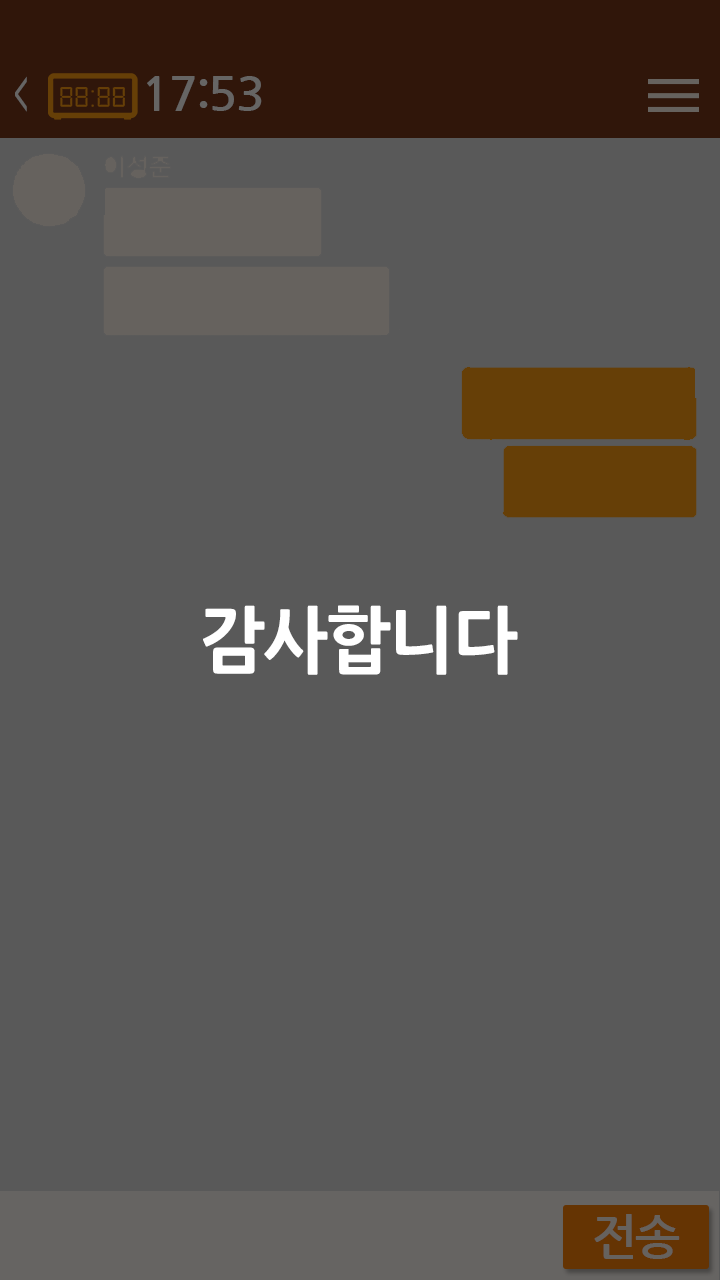
<style>
.page{position:relative;width:720px;height:1280px;background:#595959}
.page>*{position:absolute;margin:0}
.t1{font:36px "NanumGothicBold";letter-spacing:-0.04em;color:#666564;scale:0.76 1}
.t2{font:48px "NanumGothicBold";letter-spacing:-0.04em;color:#666564}
.t3{font:72px "NanumGothicExtraBold";letter-spacing:-0.025em;color:#ffffff;scale:0.96 1}
.t4{font:48px "NanumGothicBold";letter-spacing:-0.04em;color:#66625e}
</style>
<div class="page">
<p class="t1" style="left:15px;top:76px;width:12px;height:36px">&lt;</p>
<p class="t2" style="left:147px;top:76px;width:115px;height:35px">17:53</p>
<p class="t3" style="left:203px;top:605px;width:315px;height:70px">감사합니다</p>
<p class="t4" style="left:594px;top:1214px;width:86px;height:45px">전송</p>
</div>
